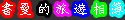
<style>
.page{position:relative;width:125px;height:20px;background:#333333}
.page>*{position:absolute;margin:0}
.t1{font:14px "DFKaiShu-SB-Estd-BF";letter-spacing:0.2em;color:#ffffff}
</style>
<div class="page">
<p class="t1" style="left:2px;top:2px;width:11px;height:13px">書</p>
<p class="t1" style="left:20px;top:3px;width:11px;height:12px">曼</p>
<p class="t1" style="left:39px;top:3px;width:10px;height:12px">的</p>
<p class="t1" style="left:56px;top:3px;width:13px;height:11px">旅</p>
<p class="t1" style="left:74px;top:3px;width:13px;height:12px">遊</p>
<p class="t1" style="left:93px;top:3px;width:11px;height:12px">相</p>
<p class="t1" style="left:112px;top:2px;width:11px;height:13px">簿</p>
</div>
